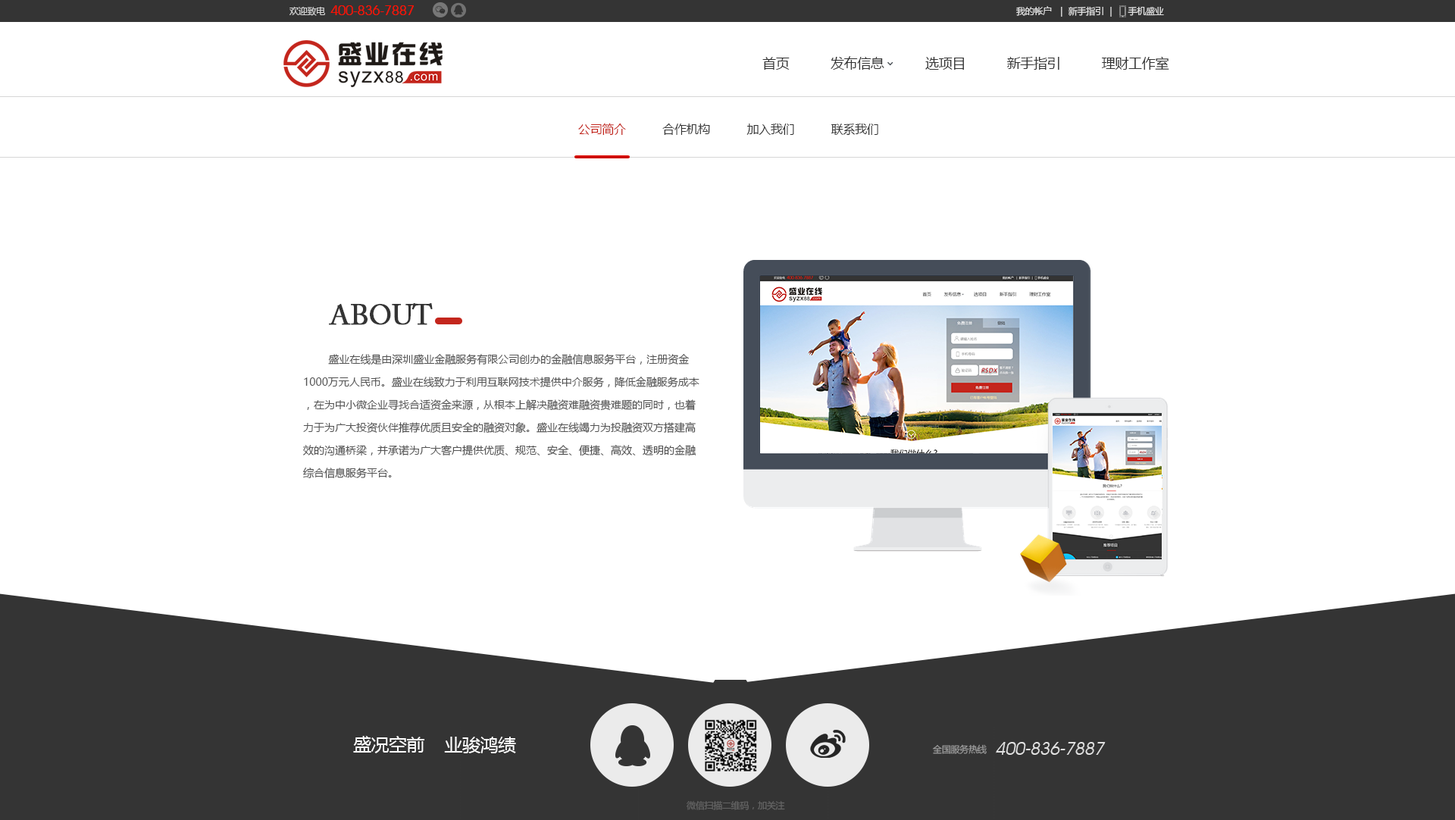
<style>
.page{position:relative;width:1455px;height:820px;background:#ffffff}
.page>*{position:absolute;margin:0}
.t1{font:13.6px "AvantGardeITCbyBT-Book";letter-spacing:-0.02em;color:#ff0f01}
.t2{font:9.1px "MicrosoftYaHei";letter-spacing:-0.02em;color:#d3d3d3}
.t3{font:9.1px "MicrosoftYaHei";letter-spacing:-0.02em;color:#e1e1e1}
.t4{font:13.6px "MicrosoftYaHei";letter-spacing:-0.02em;color:#333333}
.t5{font:12.1px "MicrosoftYaHei";letter-spacing:-0.02em;color:#343434}
.t6{font:12.1px "MicrosoftYaHei";letter-spacing:-0.02em;color:#c4261d}
.t7{font:27.9px "ACaslonPro-Regular";letter-spacing:-0.02em;color:#343434;font-weight:bold}
.t8{font:10.6px/22.7px "MicrosoftYaHei";color:#535353}
.t9{font:18.2px "MicrosoftYaHei";letter-spacing:-0.02em;color:#ffffff}
.t10{font:9.1px "MicrosoftYaHei";letter-spacing:-0.02em;color:#9a9a9a}
.t11{font:18px "AvantGardeITCbyBT-Book";letter-spacing:-0.02em;color:#e1e1e1;font-style:italic}
.t12{font:9.1px "MicrosoftYaHei";letter-spacing:-0.02em;color:#646464}
</style>
<div class="page">
<p class="t1" style="left:330px;top:5px;width:84px;height:10px">400-836-7887</p>
<p class="t2" style="left:289px;top:7px;width:36px;height:9px">欢迎致电</p>
<p class="t3" style="left:1016px;top:6px;width:148px;height:11px">我的帐户  ｜ 新手指引 ｜     手机盛业</p>
<p class="t4" style="left:762px;top:56px;width:407px;height:14px">首页           发布信息           选项目           新手指引           理财工作室</p>
<p class="t5" style="left:578px;top:123px;width:300px;height:13px"><span class="t6">公司简介   </span>        合作机构           加入我们           联系我们</p>
<p class="t7" style="left:329px;top:303px;width:104px;height:22px">ABOUT</p>
<p class="t8" style="left:303px;top:354px;width:396px;height:124px">盛业在线是由深圳盛业金融服务有限公司创办的金融信息服务平台，注册资金1000万元人民币。盛业在线致力于利用互联网技术提供中介服务，降低金融服务成本，在为中小微企业寻找合适资金来源，从根本上解决融资难融资贵难题的同时，也着力于为广大投资伙伴推荐优质且安全的融资对象。盛业在线竭力为投融资双方搭建高效的沟通桥梁，并承诺为广大客户提供优质、规范、安全、便捷、高效、透明的金融综合信息服务平台。</p>
<p class="t9" style="left:353px;top:736px;width:163px;height:17px">盛况空前    业骏鸿绩</p>
<p class="t10" style="left:933px;top:744px;width:53px;height:10px">全国服务热线</p>
<p class="t11" style="left:996px;top:742px;width:109px;height:13px">400-836-7887</p>
<p class="t12" style="left:686px;top:800px;width:99px;height:10px">微信扫描二维码，加关注</p>
</div>
